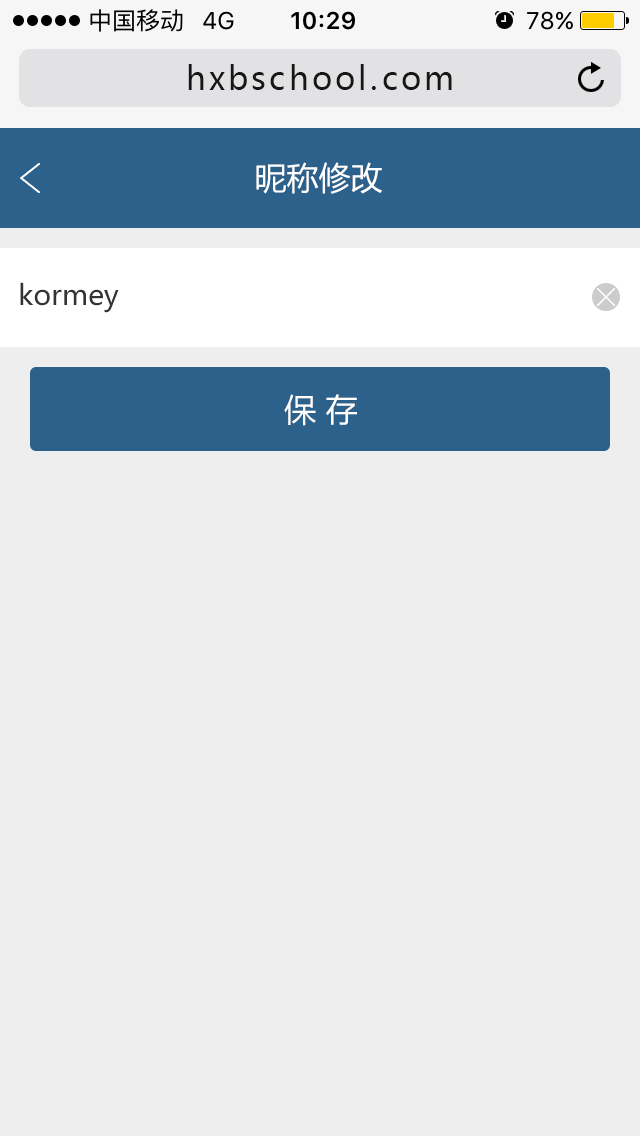
<style>
.page{position:relative;width:640px;height:1136px;background:#eeeeee}
.page>*{position:absolute;margin:0}
.t1{font:32px "MicrosoftYaHei";letter-spacing:0.1em;color:#171717}
.t2{font:32px "MicrosoftYaHei";color:#ffffff}
.t3{font:28px "MicrosoftYaHei";color:#333333}
</style>
<div class="page">
<p class="t1" style="left:188px;top:64px;width:264px;height:26px">hxbschool.com</p>
<p class="t2" style="left:256px;top:162px;width:127px;height:32px">昵称修改</p>
<p class="t3" style="left:20px;top:282px;width:99px;height:31px">kormey</p>
<p class="t2" style="left:284px;top:394px;width:73px;height:32px">保 存</p>
</div>
